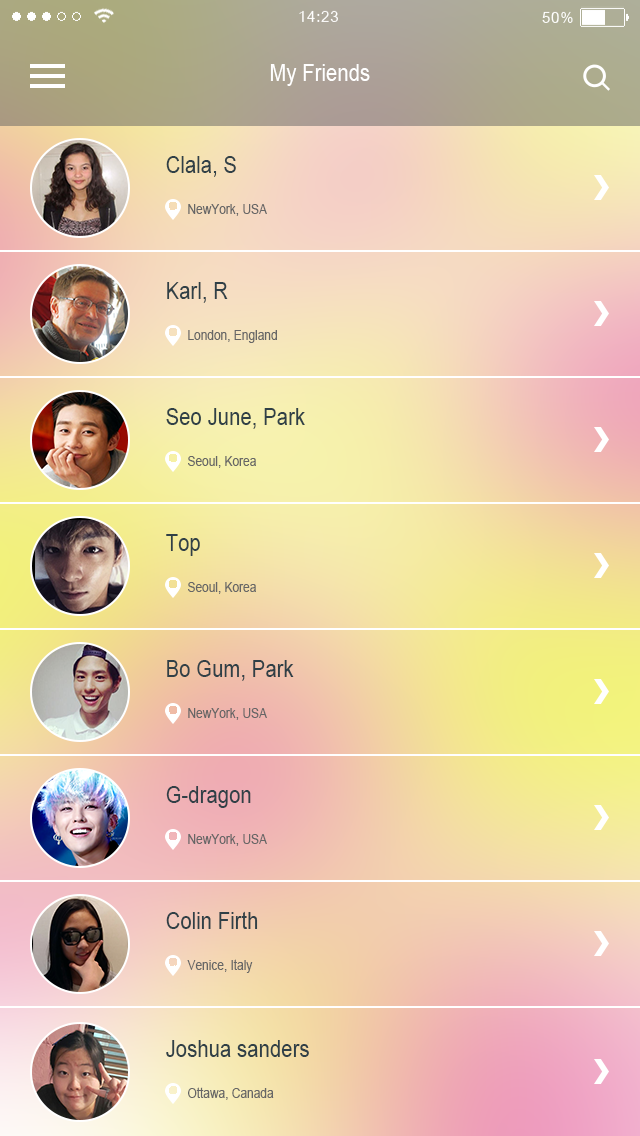
<style>
.page{position:relative;width:640px;height:1136px}
.page>*{position:absolute;margin:0}
.t1{font:24px "ArialMT";color:#ffffff;scale:0.85 1}
.t2{font:24px "ArialMT";color:#304047;scale:0.85 1}
.t3{font:14px "ArialMT";color:#666666;scale:0.85 1}
</style>
<div class="page">
<p class="t1" style="left:270px;top:64px;width:100px;height:22px">My Friends</p>
<p class="t2" style="left:166px;top:156px;width:70px;height:21px">Clala, S</p>
<p class="t3" style="left:188px;top:204px;width:79px;height:12px">NewYork, USA</p>
<p class="t2" style="left:167px;top:282px;width:61px;height:21px">Karl, R</p>
<p class="t3" style="left:188px;top:330px;width:89px;height:13px">London, England</p>
<p class="t2" style="left:166px;top:408px;width:139px;height:21px">Seo June, Park</p>
<p class="t3" style="left:188px;top:456px;width:68px;height:12px">Seoul, Korea</p>
<p class="t2" style="left:166px;top:534px;width:34px;height:22px">Top</p>
<p class="t3" style="left:188px;top:582px;width:68px;height:12px">Seoul, Korea</p>
<p class="t2" style="left:167px;top:660px;width:127px;height:21px">Bo Gum, Park</p>
<p class="t3" style="left:188px;top:708px;width:79px;height:12px">NewYork, USA</p>
<p class="t2" style="left:166px;top:786px;width:85px;height:22px">G-dragon</p>
<p class="t3" style="left:188px;top:834px;width:79px;height:12px">NewYork, USA</p>
<p class="t2" style="left:166px;top:911px;width:92px;height:18px">Colin Firth</p>
<p class="t3" style="left:187px;top:959px;width:66px;height:14px">Venice, Italy</p>
<p class="t2" style="left:166px;top:1040px;width:143px;height:17px">Joshua sanders</p>
<p class="t3" style="left:188px;top:1087px;width:86px;height:13px">Ottawa, Canada</p>
</div>
